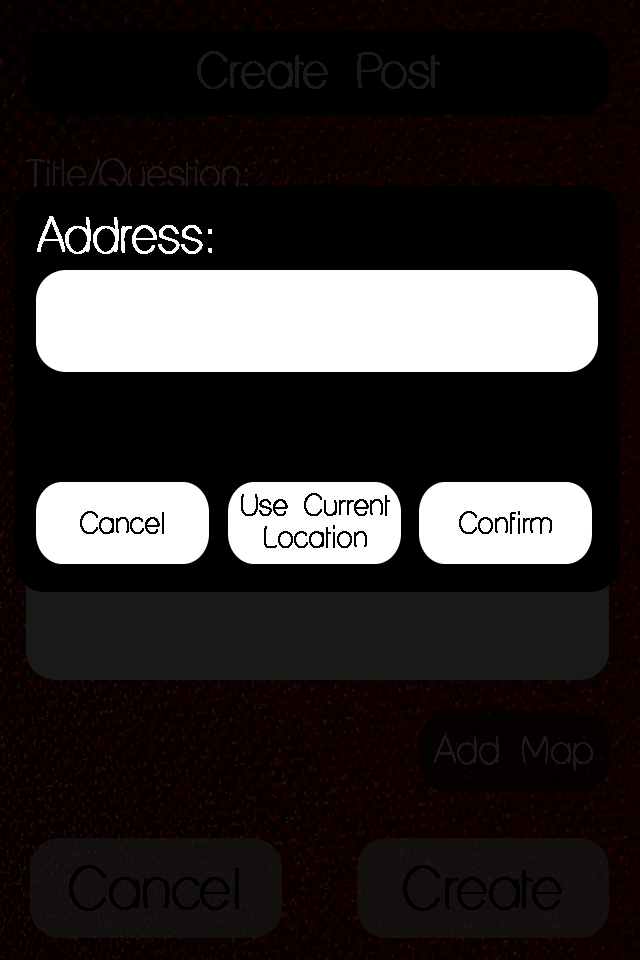
<style>
.page{position:relative;width:640px;height:960px;background:#000000}
.page>*{position:absolute;margin:0}
.t1{font:45.5px "LaneHumouresque";color:#191919;font-weight:bold}
.t2{font:35.9px "LaneHumouresque";color:#191919;font-weight:bold}
.t3{font:45.7px "LaneHumouresque";color:#ffffff;font-weight:bold}
.t4{font:27.3px "LaneHumouresque";color:#000000;font-weight:bold}
.t5{font:27.1px "LaneHumouresque";color:#000000;font-weight:bold}
.t6{font:53.7px "LaneHumouresque";color:#000000;font-weight:bold}
</style>
<div class="page">
<p class="t1" style="left:197px;top:51px;width:243px;height:38px">Create Post</p>
<p class="t2" style="left:26px;top:158px;width:222px;height:33px">Title/Question:</p>
<p class="t3" style="left:37px;top:216px;width:175px;height:38px">Address:</p>
<p class="t4" style="left:241px;top:493px;width:149px;height:55px;text-align:center">Use Current<br>Location</p>
<p class="t4" style="left:241px;top:493px;width:149px;height:55px;text-align:center">Use Current<br>Location</p>
<p class="t5" style="left:80px;top:511px;width:84px;height:23px">Cancel</p>
<p class="t5" style="left:80px;top:511px;width:84px;height:23px">Cancel</p>
<p class="t5" style="left:459px;top:511px;width:93px;height:23px">Confirm</p>
<p class="t5" style="left:459px;top:511px;width:93px;height:23px">Confirm</p>
<p class="t2" style="left:434px;top:735px;width:159px;height:36px">Add Map</p>
<p class="t6" style="left:69px;top:865px;width:170px;height:46px">Cancel</p>
<p class="t6" style="left:403px;top:865px;width:159px;height:46px">Create</p>
</div>
